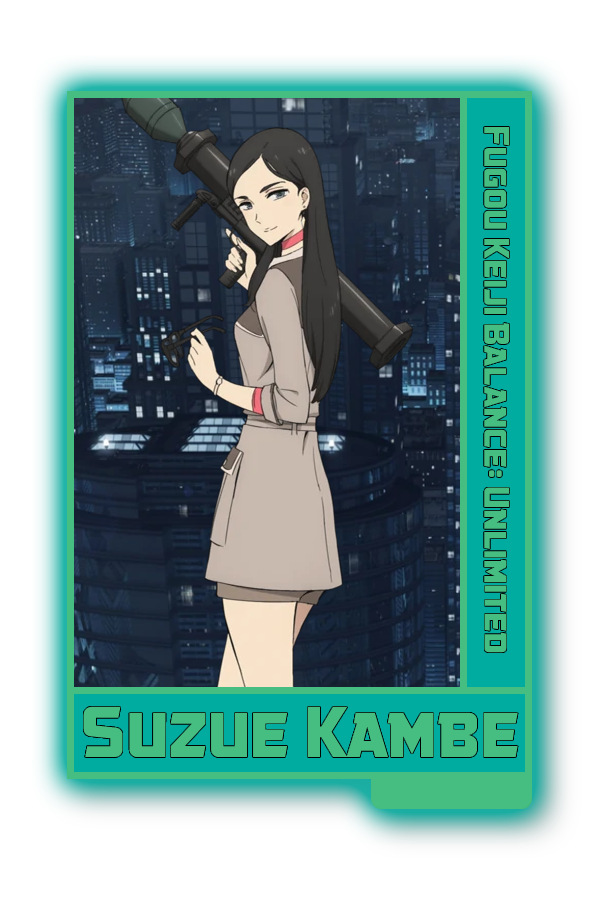
<style>
.page{position:relative;width:600px;height:900px;background:#ffffff}
.page>*{position:absolute;margin:0}
.t1{font:37.3px "GovernmentAgentBB";color:#46bd81}
.t2{font:75px "GovernmentAgentBB";color:#46bd81}
</style>
<div class="page">
<p class="t1" style="left:484px;top:127px;width:26px;height:526px;rotate:90deg">Fugou Keiji Balance: Unlimited</p>
<p class="t2" style="left:83px;top:706px;width:435px;height:51px">Suzue Kambe</p>
</div>
